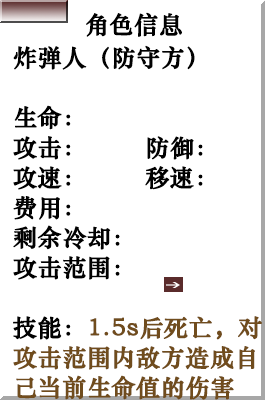
<style>
.page{position:relative;width:265px;height:400px;background:#ffffff}
.page>*{position:absolute;margin:0}
.t1{font:24px "STZhongsong";color:#000000;font-weight:bold}
.t2{font:24px/30px "STZhongsong";color:#010101;font-weight:bold}
.t3{font:24px/30px "STZhongsong";color:#704c1d;font-weight:bold}
</style>
<div class="page">
<p class="t1" style="left:86px;top:12px;width:96px;height:25px">角色信息</p>
<p class="t2" style="left:13px;top:45px;width:249px;height:355px">炸弹人（防守方）<br><br>生命：<br>攻击：       防御：<br>攻速：       移速：<br>费用：<br>剩余冷却：<br>攻击范围：<br><br>技能：<span class="t3">1.5s后死亡，对攻击范围内敌方造成自己当前生命值的伤害</span></p>
</div>
